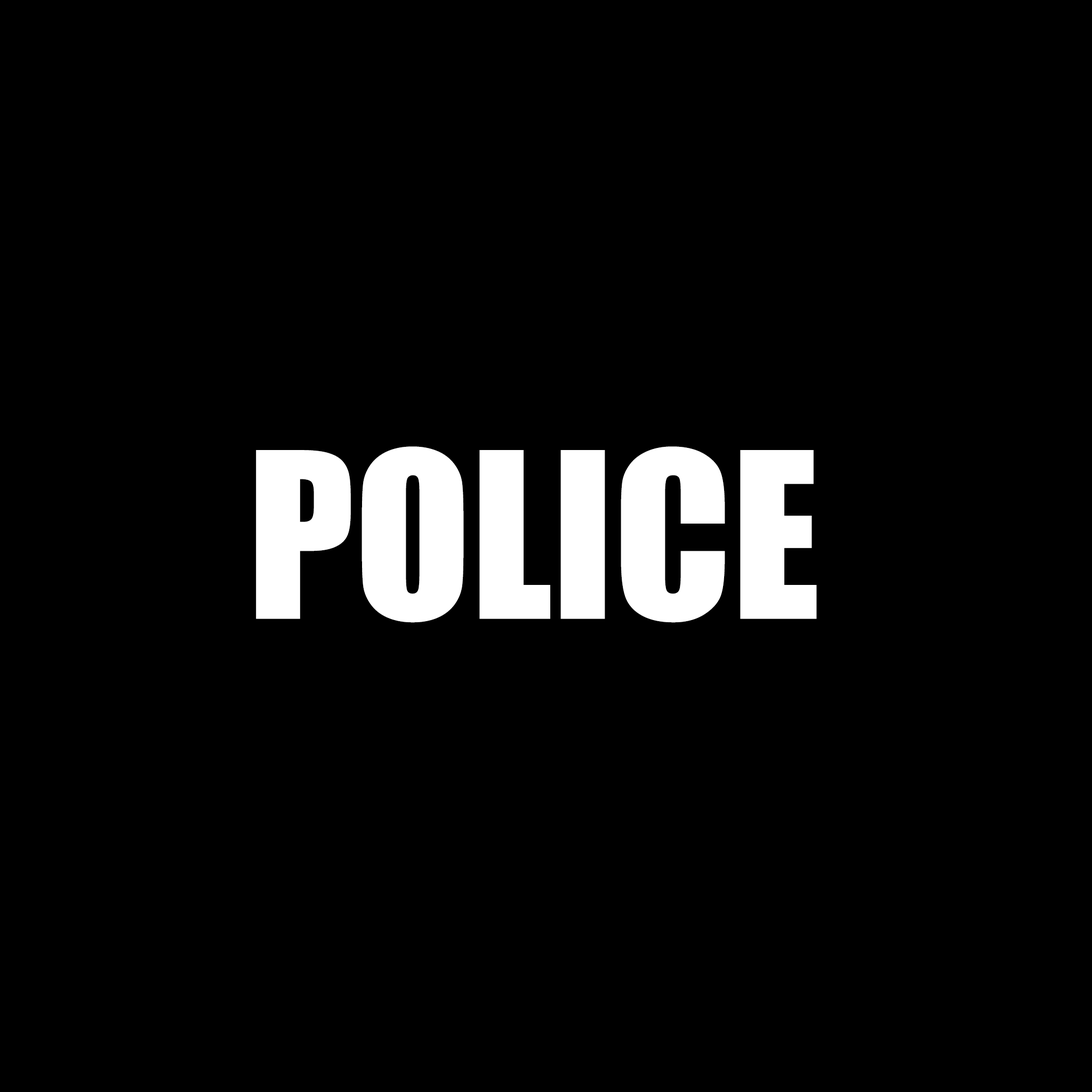
<style>
.page{position:relative;width:1092px;height:1092px;background:#000000}
.page>*{position:absolute;margin:0}
.t1{font:213.3px "Impact";color:#ffffff}
</style>
<div class="page">
<p class="t1" style="left:256px;top:446px;width:561px;height:177px">POLICE</p>
</div>
